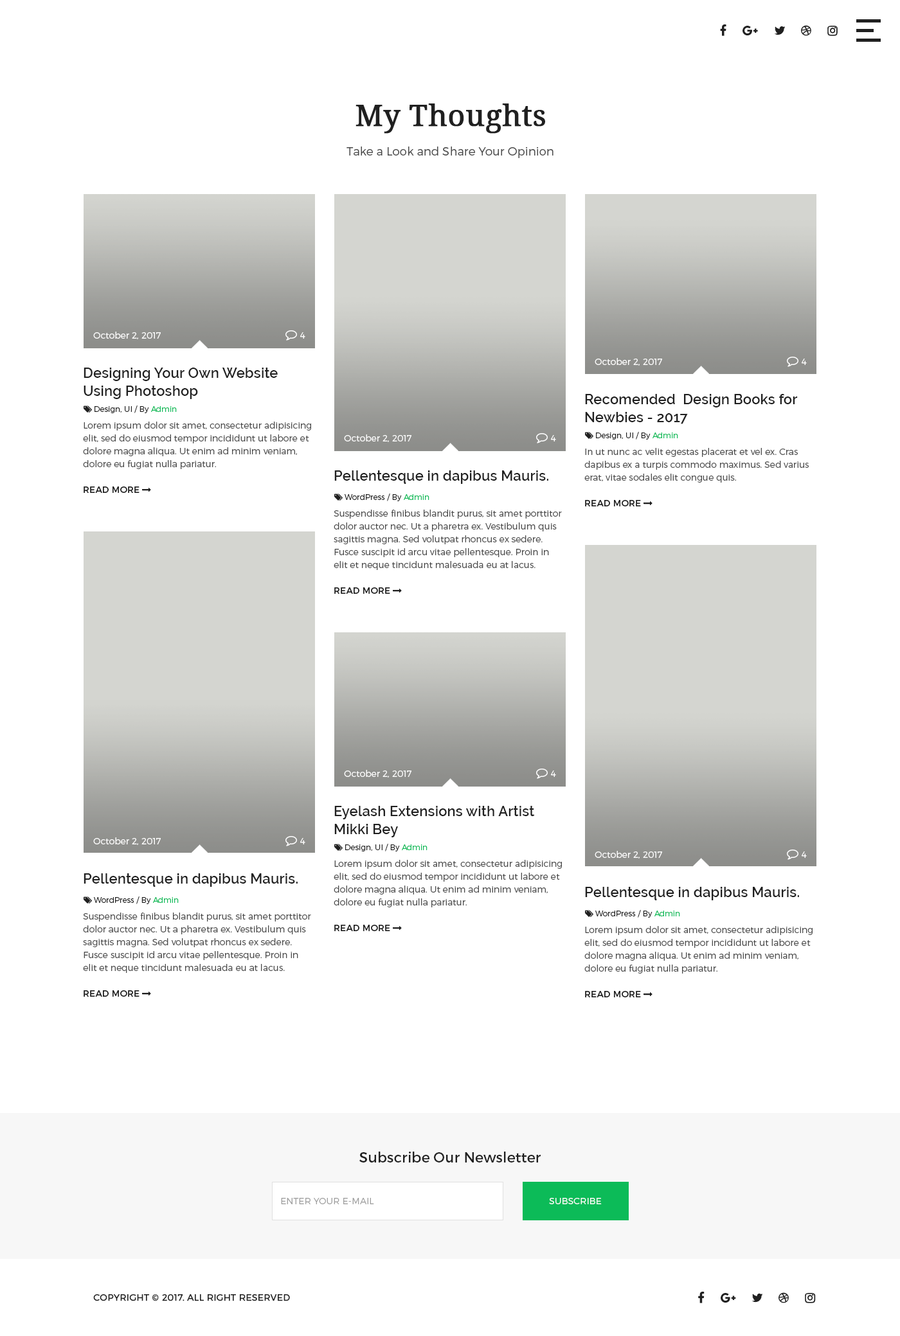
<style>
.page{position:relative;width:900px;height:1336px;background:#ffffff}
.page>*{position:absolute;margin:0}
.t1{font:29.6px "DroidSerif";color:#202020;font-weight:bold}
.t2{font:11.6px "Montserrat-Light";letter-spacing:0.007em;color:#4a4a4a}
.t3{font:9px "Montserrat-Light";color:#ffffff}
.t4{font:14.1px/18px "Raleway-SemiBold";letter-spacing:0.007em;color:#202020}
.t5{font:9px/12.9px "Montserrat-Light";color:#4a4a4a}
.t6{font:14.1px "Raleway-SemiBold";letter-spacing:0.007em;color:#202020}
.t7{font:14.1px "Montserrat-Regular";letter-spacing:0.007em;color:#202020}
.t8{font:9px "Montserrat-Light";letter-spacing:0.007em;color:#a0a0a0;text-transform:uppercase}
.t9{font:9px "Montserrat-Light";letter-spacing:0.007em;color:#ffffff;text-transform:uppercase}
.t10{font:9px "Montserrat-Light";letter-spacing:0.005em;color:#202020;text-transform:uppercase;font-weight:bold}
</style>
<div class="page">
<p class="t1" style="left:356px;top:104px;width:189px;height:30px">My Thoughts</p>
<p class="t2" style="left:346px;top:147px;width:208px;height:11px">Take a Look and Share Your Opinion</p>
<p class="t3" style="left:93px;top:332px;width:68px;height:7px">October 2, 2017</p>
<p class="t3" style="left:595px;top:358px;width:67px;height:8px">October 2, 2017</p>
<p class="t4" style="left:84px;top:368px;width:194px;height:31px">Designing Your Own Website Using Photoshop</p>
<p class="t4" style="left:585px;top:394px;width:213px;height:30px">Recomended  Design Books for Newbies - 2017</p>
<p class="t5" style="left:83px;top:422px;width:228px;height:47px">Lorem ipsum dolor sit amet, consectetur adipisicing elit, sed do eiusmod tempor incididunt ut labore et dolore magna aliqua. Ut enim ad minim veniam,  dolore eu fugiat nulla pariatur.</p>
<p class="t3" style="left:344px;top:435px;width:67px;height:7px">October 2, 2017</p>
<p class="t5" style="left:584px;top:448px;width:225px;height:35px">In ut nunc ac velit egestas placerat et vel ex. Cras dapibus ex a turpis commodo maximus. Sed varius erat, vitae sodales elit congue quis.</p>
<p class="t6" style="left:334px;top:471px;width:214px;height:13px">Pellentesque in dapibus Mauris.</p>
<p class="t5" style="left:334px;top:510px;width:228px;height:60px">Suspendisse finibus blandit purus, sit amet porttitor dolor auctor nec. Ut a pharetra ex. Vestibulum quis sagittis magna. Sed volutpat rhoncus ex sedere. Fusce suscipit id arcu vitae pellentesque. Proin in elit et neque tincidunt malesuada eu at lacus.</p>
<p class="t3" style="left:344px;top:770px;width:67px;height:8px">October 2, 2017</p>
<p class="t4" style="left:334px;top:806px;width:201px;height:32px">Eyelash Extensions with Artist <br>Mikki Bey</p>
<p class="t3" style="left:93px;top:838px;width:68px;height:7px">October 2, 2017</p>
<p class="t3" style="left:595px;top:851px;width:67px;height:8px">October 2, 2017</p>
<p class="t5" style="left:334px;top:860px;width:228px;height:48px">Lorem ipsum dolor sit amet, consectetur adipisicing elit, sed do eiusmod tempor incididunt ut labore et dolore magna aliqua. Ut enim ad minim veniam,  dolore eu fugiat nulla pariatur.</p>
<p class="t6" style="left:84px;top:874px;width:214px;height:13px">Pellentesque in dapibus Mauris.</p>
<p class="t6" style="left:585px;top:887px;width:214px;height:14px">Pellentesque in dapibus Mauris.</p>
<p class="t5" style="left:83px;top:913px;width:228px;height:60px">Suspendisse finibus blandit purus, sit amet porttitor dolor auctor nec. Ut a pharetra ex. Vestibulum quis sagittis magna. Sed volutpat rhoncus ex sedere. Fusce suscipit id arcu vitae pellentesque. Proin in elit et neque tincidunt malesuada eu at lacus.</p>
<p class="t5" style="left:584px;top:926px;width:229px;height:48px">Lorem ipsum dolor sit amet, consectetur adipisicing elit, sed do eiusmod tempor incididunt ut labore et dolore magna aliqua. Ut enim ad minim veniam,  dolore eu fugiat nulla pariatur.</p>
<p class="t7" style="left:359px;top:1152px;width:182px;height:11px">Subscribe Our Newsletter</p>
<p class="t8" style="left:281px;top:1198px;width:93px;height:7px">Enter Your E-mail</p>
<p class="t9" style="left:549px;top:1198px;width:53px;height:7px">Subscribe</p>
<p class="t9" style="left:549px;top:1198px;width:53px;height:7px">Subscribe</p>
<p class="t10" style="left:93px;top:1295px;width:197px;height:7px">Copyright © 2017. All right reserved</p>
</div>
